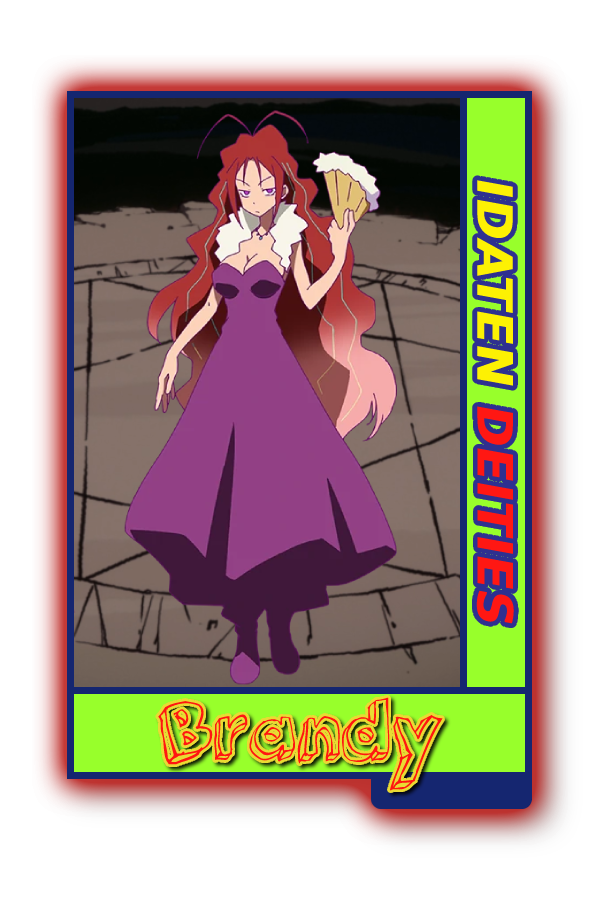
<style>
.page{position:relative;width:600px;height:900px;background:#ffffff}
.page>*{position:absolute;margin:0}
.t1{font:48.8px "MADETOMMY-Bold";color:#ff1713;font-weight:bold;font-style:italic}
.t2{font:48.8px "MADETOMMY-Bold";color:#fdf103;font-weight:bold;font-style:italic}
.t3{font:75px "3dumb";color:#ff1611}
</style>
<div class="page">
<p class="t1" style="left:476px;top:180px;width:38px;height:444px;rotate:90deg"><span class="t2">IDATEN </span>DEITIES</p>
<p class="t3" style="left:158px;top:697px;width:285px;height:94px">Brandy</p>
</div>
